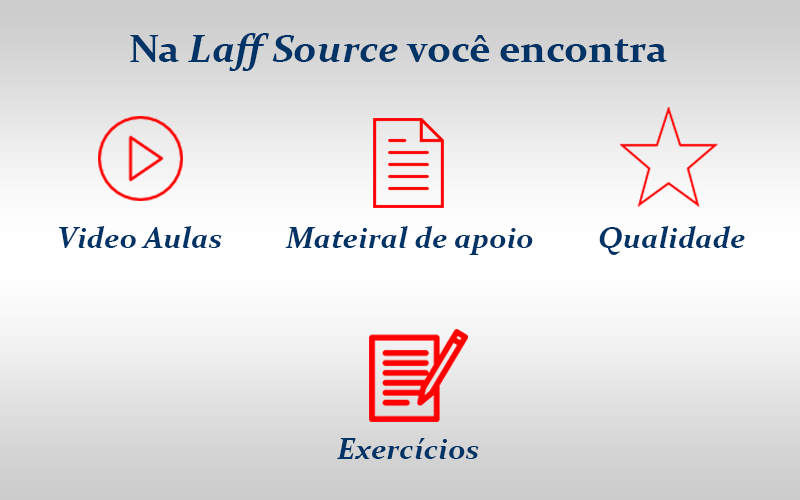
<style>
.page{position:relative;width:800px;height:500px}
.page>*{position:absolute;margin:0}
.t1{font:40px "Constantia-Bold";color:#003366}
.t2{font:40px "Constantia-BoldItalic";color:#003366}
.t3{font:30px "Constantia-BoldItalic";color:#003366}
</style>
<div class="page">
<p class="t1" style="left:130px;top:33px;width:537px;height:38px">Na <span class="t2">Laff Source</span> você encontra</p>
<p class="t3" style="left:59px;top:226px;width:163px;height:22px">Video Aulas</p>
<p class="t3" style="left:285px;top:226px;width:248px;height:29px">Mateiral de apoio</p>
<p class="t3" style="left:599px;top:226px;width:146px;height:29px">Qualidade</p>
<p class="t3" style="left:337px;top:438px;width:142px;height:21px">Exercícios</p>
</div>
